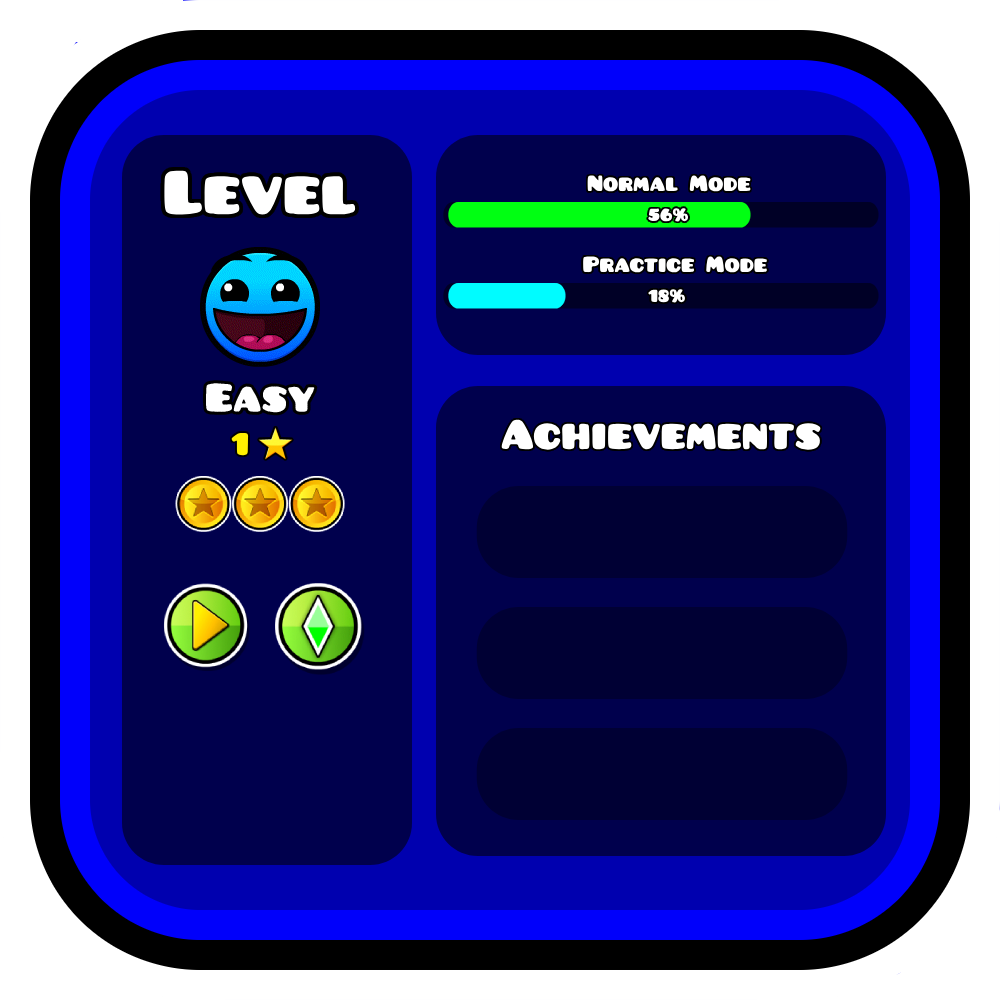
<style>
.page{position:relative;width:1000px;height:1000px;background:#00004d}
.page>*{position:absolute;margin:0}
.t1{font:67.2px "Pusab";color:#ffffff}
.t2{font:24px "Pusab";color:#ffffff}
.t3{font:19px "Pusab";color:#ffffff}
.t4{font:45px "Pusab";color:#ffffff}
.t5{font:34.3px "Pusab";color:#fff000}
</style>
<div class="page">
<p class="t1" style="left:164px;top:170px;width:192px;height:45px">Level</p>
<p class="t2" style="left:587px;top:175px;width:164px;height:17px">Normal Mode</p>
<p class="t3" style="left:648px;top:208px;width:41px;height:14px">56%</p>
<p class="t2" style="left:583px;top:256px;width:184px;height:17px">Practice Mode</p>
<p class="t3" style="left:648px;top:289px;width:37px;height:14px">18%</p>
<p class="t4" style="left:501px;top:419px;width:320px;height:31px">Achievements</p>
<p class="t5" style="left:231px;top:433px;width:18px;height:23px">1</p>
</div>
